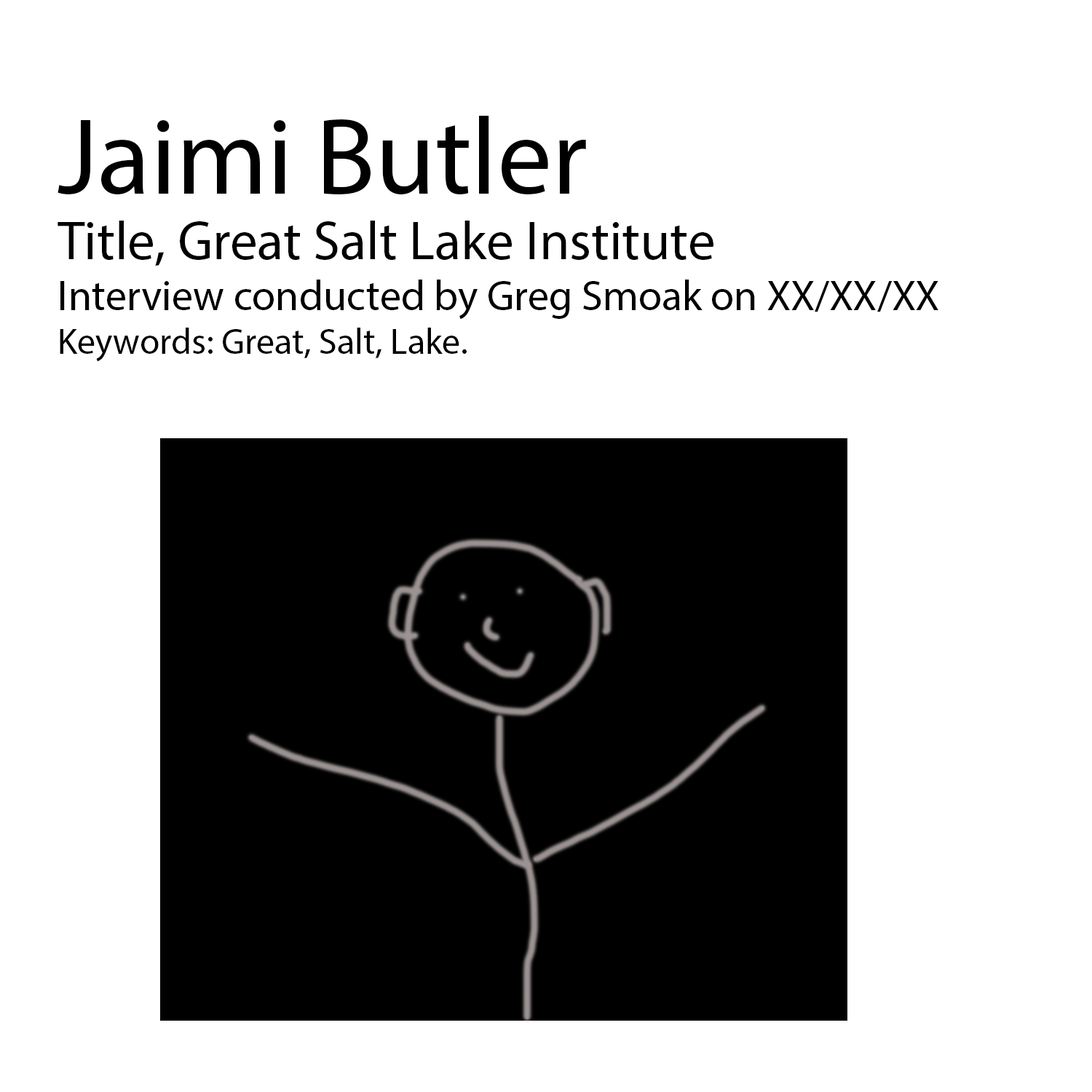
<style>
.page{position:relative;width:1092px;height:1092px;background:#ffffff}
.page>*{position:absolute;margin:0}
.t1{font:42.5px "MyriadPro-Regular";color:#000000}
.t2{font:109.2px "MyriadPro-Regular";color:#000000}
.t3{font:54.6px "MyriadPro-Regular";color:#000000}
.t4{font:36.4px "MyriadPro-Regular";color:#000000}
</style>
<div class="page">
<p class="t1" style="left:58px;top:116px;width:880px;height:246px"><span class="t2">Jaimi Butler<br></span><span class="t3">Title, Great Salt Lake Institute<br></span>Interview conducted by Greg Smoak on XX/XX/XX<br><span class="t4">Keywords: Great, Salt, Lake.</span></p>
</div>
